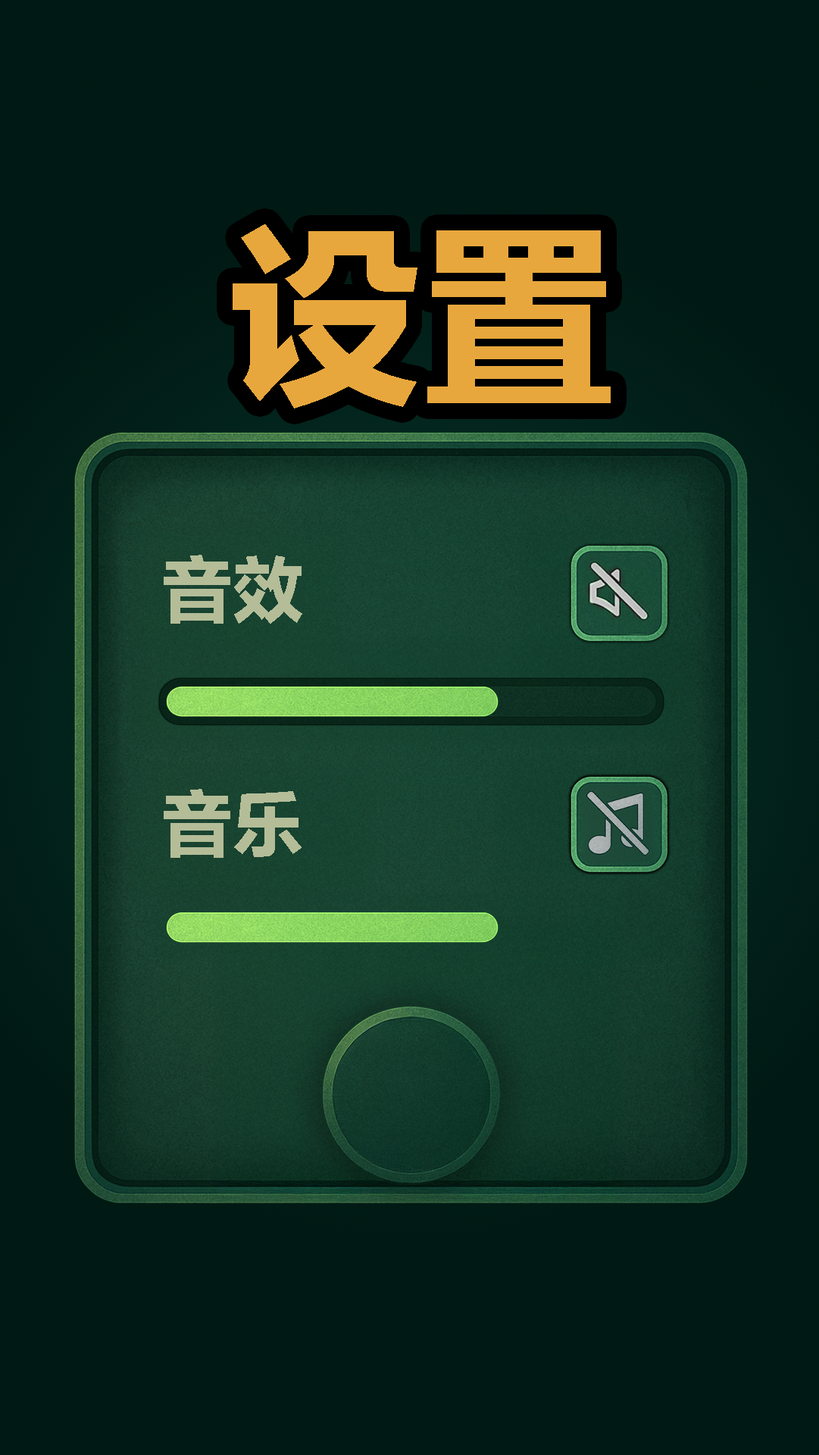
<style>
.page{position:relative;width:819px;height:1455px}
.page>*{position:absolute;margin:0}
.t1{font:195.4px "FZLTDHJW--GB1-0";color:#e8a73c}
.t2{font:71.7px "FZLTDHJW--GB1-0";color:#b4bd98}
</style>
<div class="page">
<p class="t1" style="left:233px;top:224px;width:378px;height:185px">设置</p>
<p class="t2" style="left:164px;top:555px;width:138px;height:69px">音效</p>
<p class="t2" style="left:164px;top:789px;width:138px;height:69px">音乐</p>
</div>
